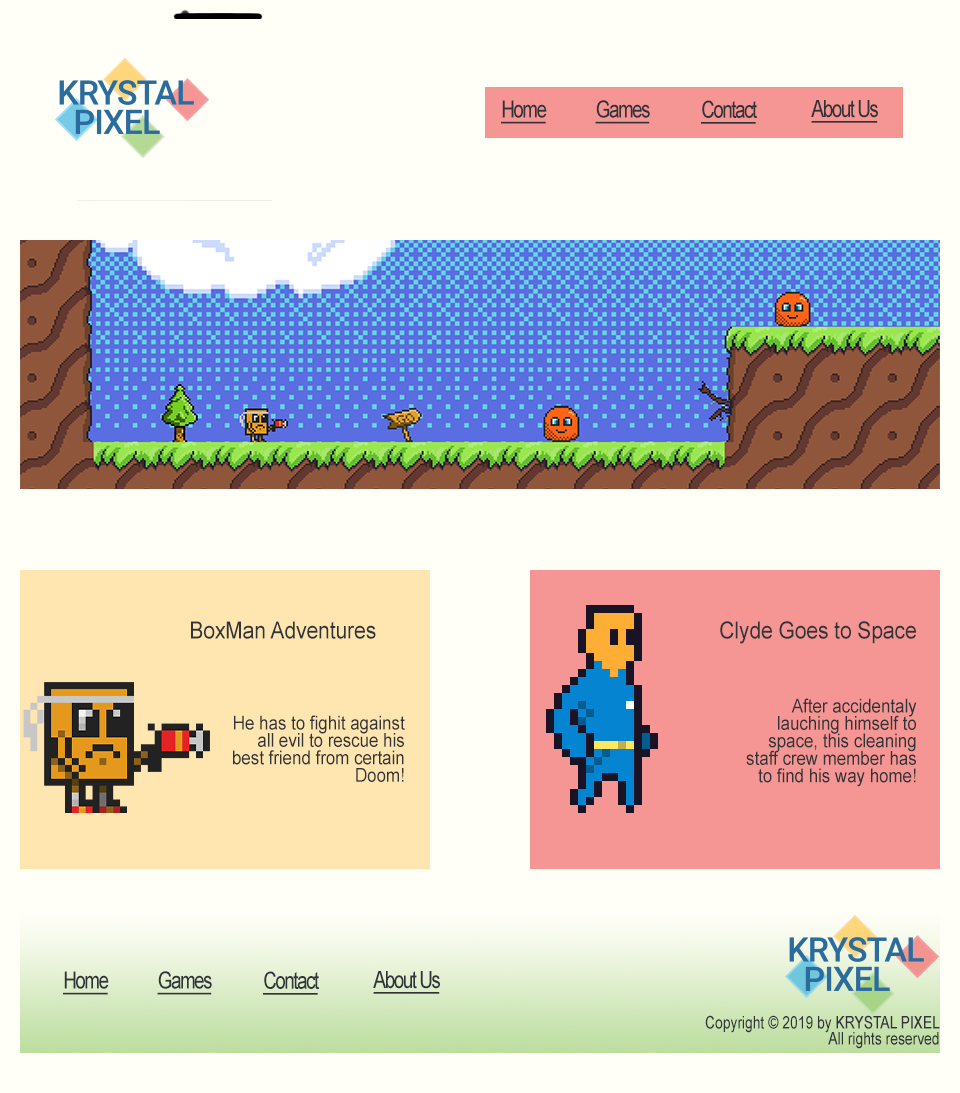
<style>
.page{position:relative;width:960px;height:1093px;background:#fffef7}
.page>*{position:absolute;margin:0}
.t1{font:23.6px "ArialMT";letter-spacing:-0.08em;color:#303439;text-decoration:underline;scale:0.8 1}
.t2{font:23.6px "ArialMT";color:#303439;scale:0.89 1}
.t3{font:19.1px "ArialMT";color:#303439;scale:0.89 1}
.t4{font:17.3px "ArialMT";color:#303439;scale:0.8 1}
</style>
<div class="page">
<p class="t1" style="left:501px;top:100px;width:46px;height:24px">Home</p>
<p class="t1" style="left:595px;top:100px;width:55px;height:24px">Games</p>
<p class="t1" style="left:701px;top:100px;width:56px;height:24px">Contact</p>
<p class="t1" style="left:811px;top:100px;width:67px;height:23px">About Us</p>
<p class="t2" style="left:191px;top:621px;width:185px;height:18px">BoxMan Adventures</p>
<p class="t2" style="left:720px;top:621px;width:196px;height:23px">Clyde Goes to Space</p>
<p class="t3" style="left:746px;top:698px;width:171px;height:89px;text-align:right">After accidentaly lauching himself to space, this cleaning staff crew member has to find his way home!</p>
<p class="t3" style="left:233px;top:715px;width:172px;height:67px;text-align:right">He has to fighit against all evil to rescue his best friend from certain Doom!</p>
<p class="t1" style="left:63px;top:971px;width:46px;height:24px">Home</p>
<p class="t1" style="left:157px;top:971px;width:55px;height:24px">Games</p>
<p class="t1" style="left:263px;top:971px;width:56px;height:24px">Contact</p>
<p class="t1" style="left:373px;top:971px;width:67px;height:23px">About Us</p>
<p class="t4" style="left:705px;top:1015px;width:235px;height:34px;text-align:right">Copyright © 2019 by KRYSTAL PIXEL<br>All rights reserved</p>
</div>
